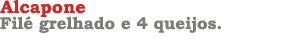
<style>
.page{position:relative;width:300px;height:50px;background:#ffffff}
.page>*{position:absolute;margin:0}
.t1{font:18px "BookmanOldStyle-Bold";color:#d42525}
.t2{font:17px "BookmanOldStyle-Bold";color:#7c7c79}
</style>
<div class="page">
<p class="t1" style="left:0px;top:0px;width:86px;height:17px">Alcapone</p>
<p class="t2" style="left:0px;top:16px;width:221px;height:17px">Filé grelhado e 4 queijos.</p>
</div>
